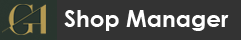
<style>
.page{position:relative;width:241px;height:40px;background:#333333}
.page>*{position:absolute;margin:0}
.t1{font:23px "CenturyGothic-Bold";color:#ffffff}
</style>
<div class="page">
<p class="t1" style="left:64px;top:10px;width:165px;height:21px">Shop Manager</p>
</div>
